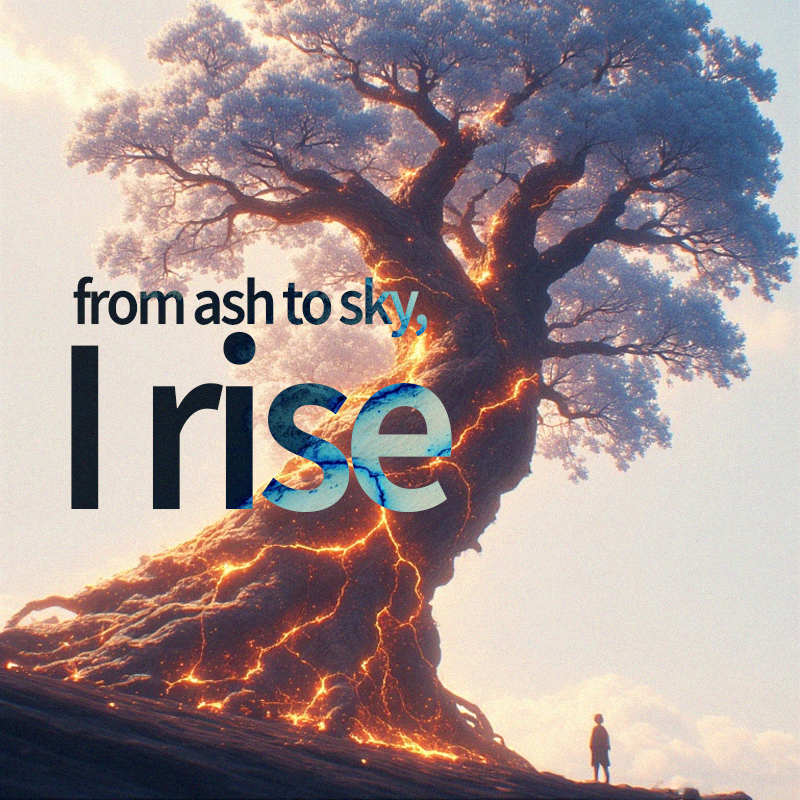
<style>
.page{position:relative;width:800px;height:800px}
.page>*{position:absolute;margin:0}
.t1{font:66px "SourceSansRoman-Semibold";letter-spacing:-0.06em;scale:0.93 1}
.t2{font:250px "SourceSansRoman-Semibold";letter-spacing:-0.06em;scale:0.93 1}
</style>
<div class="page">
<p class="t1" style="left:73px;top:276px;width:355px;height:62px">from ash to sky,</p>
<p class="t2" style="left:71px;top:331px;width:381px;height:181px">І rise</p>
</div>
